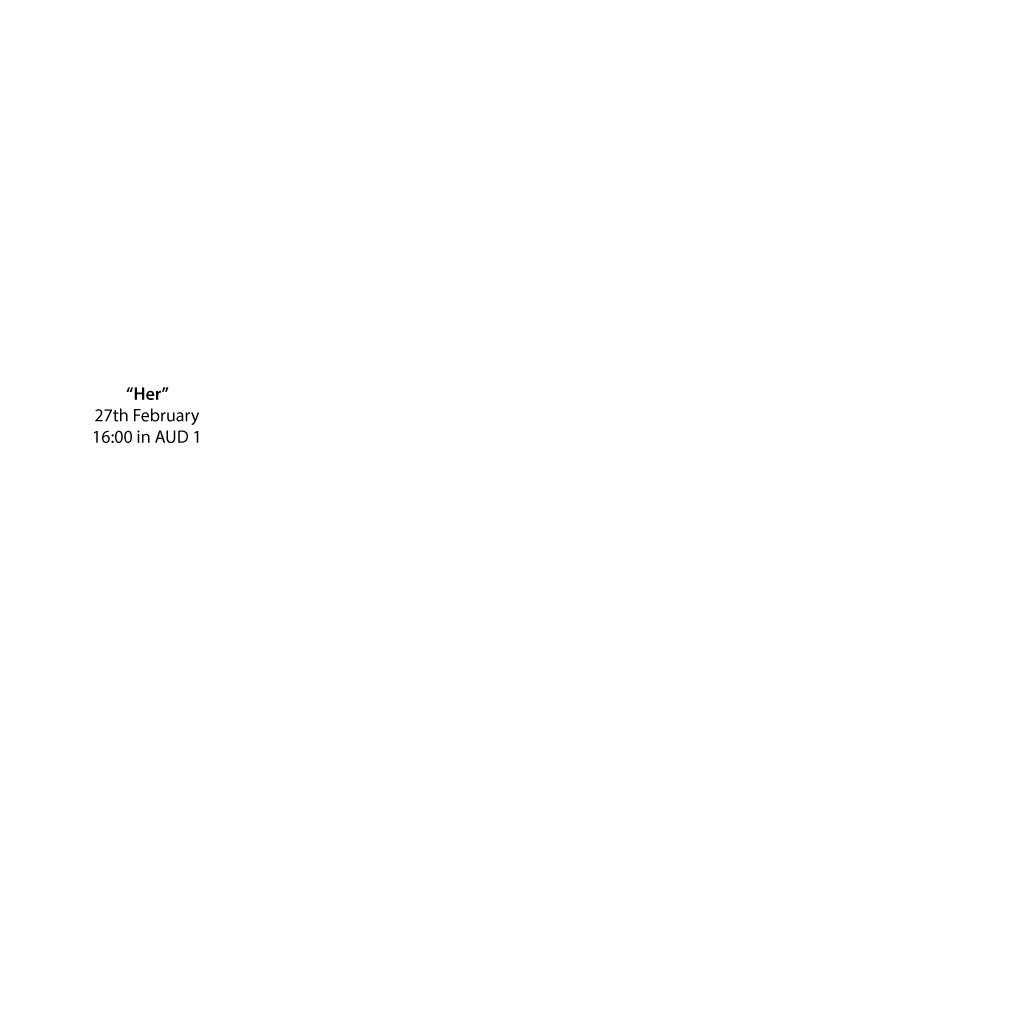
<style>
.page{position:relative;width:1020px;height:1020px;background:#ffffff}
.page>*{position:absolute;margin:0}
.t1{font:18px "MyriadPro-Regular";color:#000000}
.t2{font:18px "MyriadPro-Semibold";color:#000000}
</style>
<div class="page">
<p class="t1" style="left:94px;top:387px;width:106px;height:56px;text-align:center"><span class="t2">“Her”<br></span>27th February<br>16:00 in AUD 1</p>
</div>
